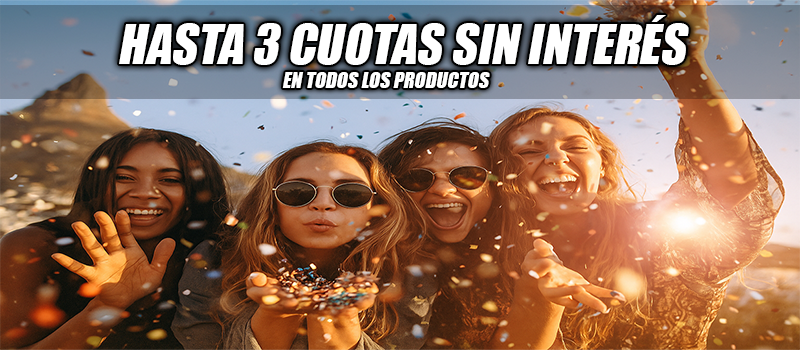
<style>
.page{position:relative;width:800px;height:350px}
.page>*{position:absolute;margin:0}
.t1{font:50px "Impact";color:#ffffff;font-style:italic}
.t2{font:20px "Impact";color:#ffffff;font-style:italic}
</style>
<div class="page">
<p class="t1" style="left:119px;top:15px;width:570px;height:50px">HASTA 3 CUOTAS SIN INTERÉS</p>
<p class="t2" style="left:282px;top:72px;width:208px;height:16px">EN TODOS LOS PRODUCTOS</p>
</div>
